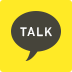
<style>
.page{position:relative;width:72px;height:72px;background:#ffea26}
.page>*{position:absolute;margin:0}
.t1{font:12px "Bahnschrift";letter-spacing:0.1em;color:#ffffff}
</style>
<div class="page">
<p class="t1" style="left:20px;top:27px;width:32px;height:10px">TALK</p>
</div>
